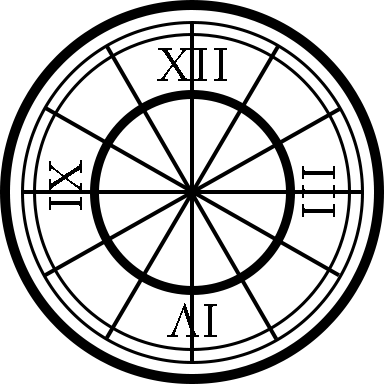
<style>
.page{position:relative;width:384px;height:384px;background:#ffffff}
.page>*{position:absolute;margin:0}
.t1{font:46px "ACaslonPro-Regular";letter-spacing:0.04em;color:#000000}
</style>
<div class="page">
<p class="t1" style="left:157px;top:48px;width:70px;height:33px">XII</p>
<p class="t1" style="left:49px;top:160px;width:33px;height:50px;rotate:-90deg">IX</p>
<p class="t1" style="left:302px;top:166px;width:33px;height:51px;rotate:90deg">III</p>
<p class="t1" style="left:167px;top:303px;width:50px;height:34px;rotate:180deg">IV</p>
</div>
